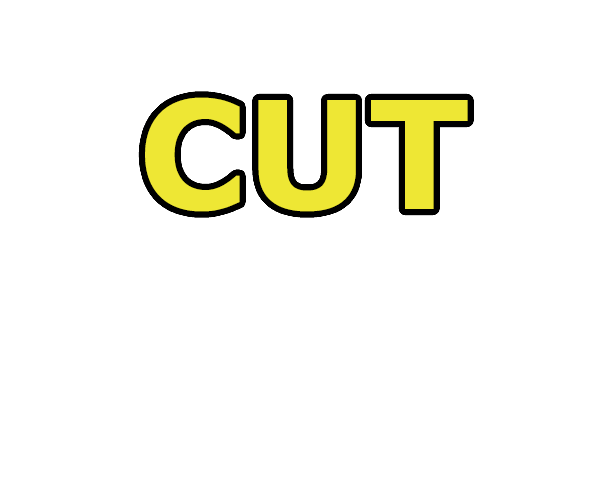
<style>
.page{position:relative;width:608px;height:490px;background:#ffffff}
.page>*{position:absolute;margin:0}
.t1{font:150px "Verdana-Bold"}
</style>
<div class="page">
<p class="t1" style="left:145px;top:97px;width:323px;height:292px;text-align:center">CUT<br>ALL</p>
</div>
